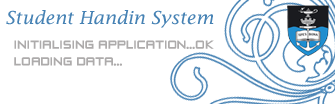
<style>
.page{position:relative;width:335px;height:104px;background:#ffffff}
.page>*{position:absolute;margin:0}
.t1{font:18px "LucidaFax-Italic";color:#4682b4}
.t2{font:14px "ZeroTwos";color:#adabab}
</style>
<div class="page">
<p class="t1" style="left:6px;top:10px;width:208px;height:18px">Student Handin System</p>
<p class="t2" style="left:14px;top:40px;width:200px;height:26px">INITIALISING APPLICATION...OK<br>LOADING DATA...</p>
</div>
